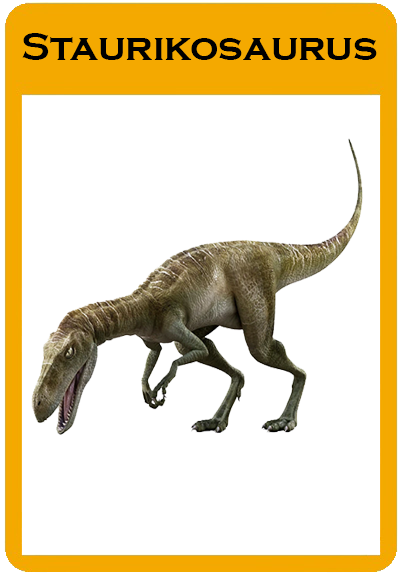
<style>
.page{position:relative;width:400px;height:575px;background:#ffffff}
.page>*{position:absolute;margin:0}
.t1{font:40px "CopperplateGothic-Bold";color:#000000}
</style>
<div class="page">
<p class="t1" style="left:22px;top:33px;width:355px;height:27px">Staurikosaurus</p>
</div>
